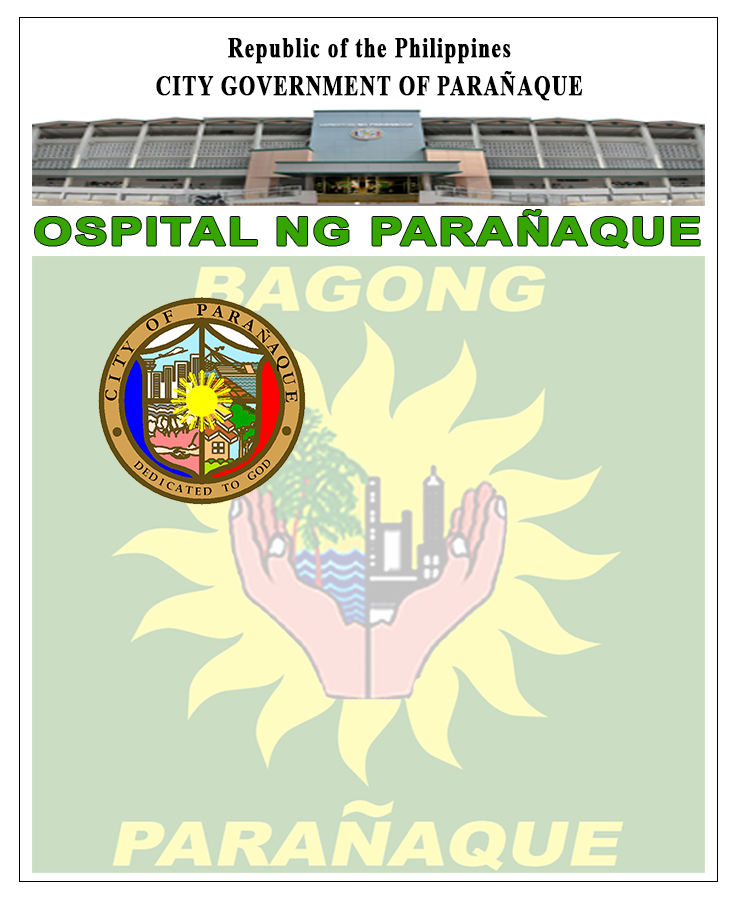
<style>
.page{position:relative;width:736px;height:901px;background:#cbddc2}
.page>*{position:absolute;margin:0}
.t1{font:29.2px "TimesNewRomanPS-BoldMT";letter-spacing:0.04em;color:#000000;font-weight:bold;scale:0.73 1}
.t2{font:38.7px "Arial-BoldMT";letter-spacing:0.02em;color:#36a500;font-weight:bold;scale:1.27 1}
</style>
<div class="page">
<p class="t1" style="left:228px;top:38px;width:283px;height:26px">Republic of the Philippines</p>
<p class="t1" style="left:156px;top:71px;width:427px;height:30px">CITY GOVERNMENT OF PARAÑAQUE</p>
<p class="t2" style="left:35px;top:210px;width:665px;height:38px">OSPITAL NG PARAÑAQUE</p>
</div>
